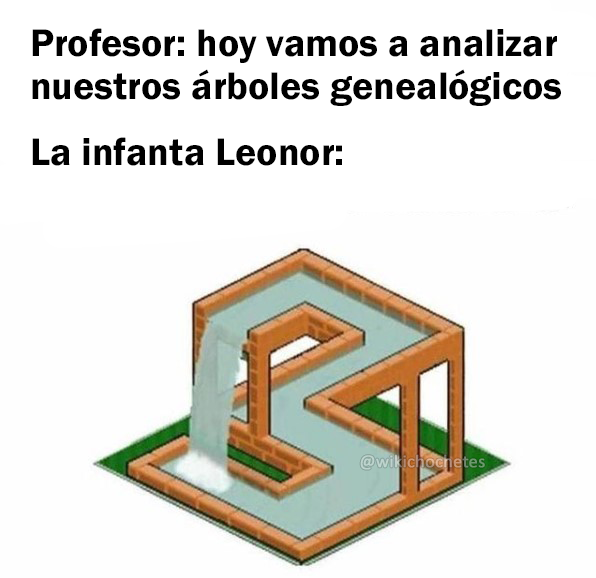
<style>
.page{position:relative;width:596px;height:578px;background:#fefefe}
.page>*{position:absolute;margin:0}
.t1{font:39.7px "FranklinGothic-Demi";color:#000000}
.t2{font:18px "Calibri";font-weight:bold}
</style>
<div class="page">
<p class="t1" style="left:32px;top:28px;width:529px;height:138px">Profesor: hoy vamos a analizar<br>nuestros árboles genealógicos<br>La infanta Leonor:</p>
<p class="t2" style="left:360px;top:454px;width:125px;height:16px">@wikichochetes</p>
</div>
